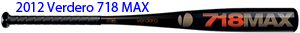
<style>
.page{position:relative;width:300px;height:33px;background:#ffffff}
.page>*{position:absolute;margin:0}
.t1{font:14px "MyriadPro-Regular";color:#0000ff}
</style>
<div class="page">
<p class="t1" style="left:16px;top:2px;width:133px;height:10px">2012 Verdero 718 MAX</p>
</div>
